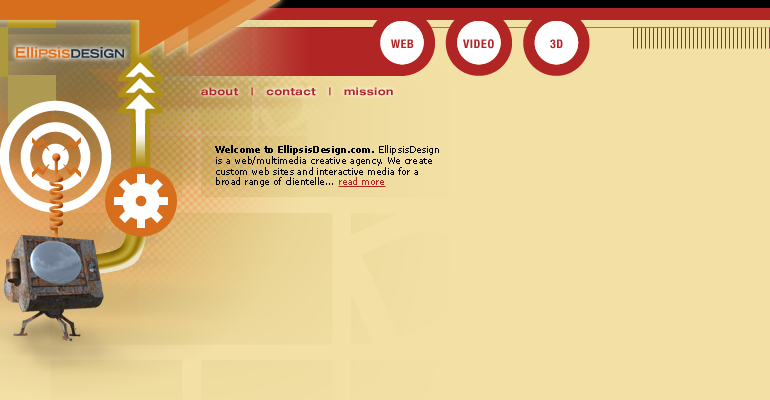
<style>
.page{position:relative;width:770px;height:400px;background:#f3e0a5}
.page>*{position:absolute;margin:0}
.t1{font:12px "HelveticaNeue-BoldCond";letter-spacing:0.05em;color:#b12525}
.t2{font:10px "HelveticaNeue-BoldExt";letter-spacing:0.05em;color:#b12525}
.t3{font:9px "Verdana";color:#000000}
.t4{font:9px "Verdana-Bold";color:#000000}
.t5{font:9px "Verdana";color:#b12525}
</style>
<div class="page">
<p class="t1" style="left:391px;top:39px;width:23px;height:9px">WEB</p>
<p class="t1" style="left:463px;top:39px;width:31px;height:10px">VIDEO</p>
<p class="t1" style="left:550px;top:39px;width:13px;height:10px">3D</p>
<p class="t2" style="left:201px;top:87px;width:192px;height:9px">about   |   contact   |   mission</p>
<p class="t3" style="left:215px;top:145px;width:224px;height:42px"><span class="t4">Welcome to EllipsisDesign.com.</span> EllipsisDesign<br>is a web/multimedia creative agency. We create<br>custom web sites and interactive media for a<br>broad range of clientelle... <span class="t5">read more</span></p>
</div>
